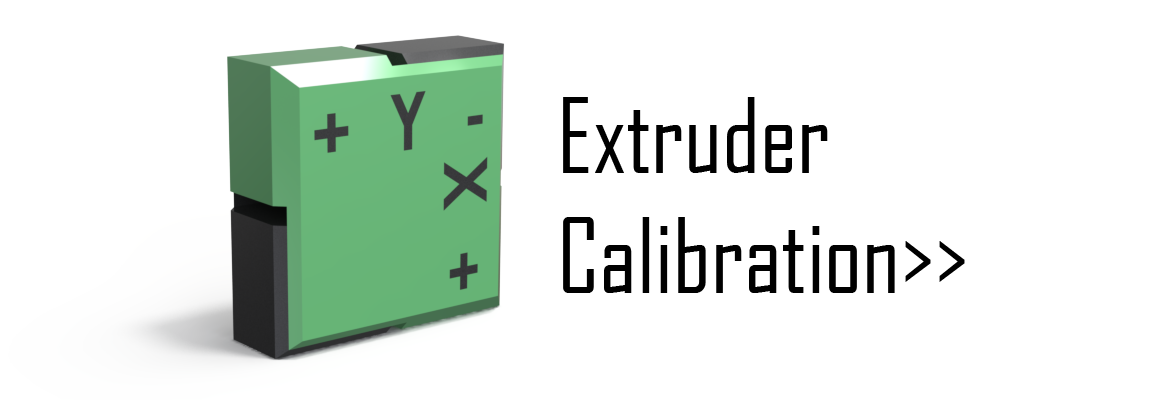
<style>
.page{position:relative;width:1170px;height:400px;background:#ffffff}
.page>*{position:absolute;margin:0}
.t1{font:100px "AgencyFB-Reg";color:#000000}
</style>
<div class="page">
<p class="t1" style="left:563px;top:97px;width:402px;height:196px">Extruder<br>Calibration&gt;&gt;</p>
</div>
